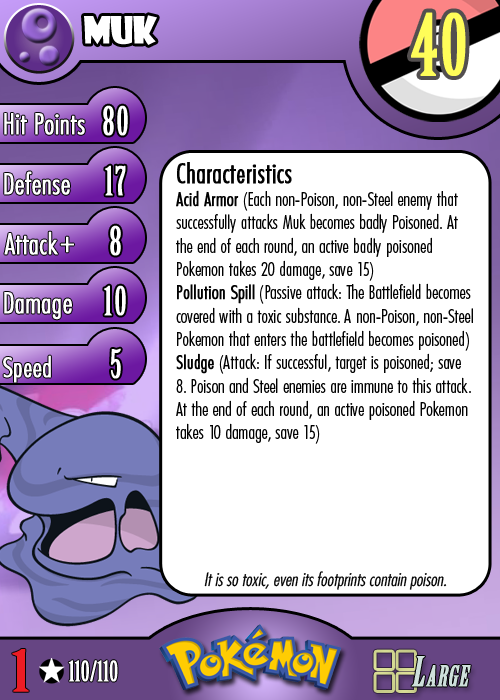
<style>
.page{position:relative;width:500px;height:700px;background:#ffffff}
.page>*{position:absolute;margin:0}
.t1{font:36.7px "ShowcardGothic-Reg";letter-spacing:-0.025em;color:#ffffff;scale:0.91 1}
.t2{font:83.3px "BirchStd";letter-spacing:0.025em;color:#fffd59;font-weight:bold}
.t3{font:27.8px "Futura-CondensedLight";color:#ffffff;font-weight:bold}
.t4{font:38.9px "BirchStd";letter-spacing:0.035em;color:#ffffff;font-weight:bold}
.t5{font:19.4px "FuturaCondensedBQ-Light";color:#010101}
.t6{font:27.8px "FuturaCondensedBQ-Light";color:#010101;font-weight:bold}
.t7{font:19.4px "FuturaCondensedBQ-Light";color:#010101;font-weight:bold}
.t8{font:30.6px "Futura-CondensedLight";color:#ffffff;font-weight:bold}
.t9{font:27.8px "FuturaCondensedBQ-Light";color:#ffffff;font-weight:bold}
.t10{font:18.1px "Futura-CondensedLight";color:#010101;font-style:italic}
.t11{font:55.6px "BirchStd";color:#ed1c24;font-weight:bold;scale:1.5 1}
.t12{font:27.8px "BirchStd";color:#ffffff;font-weight:bold}
</style>
<div class="page">
<p class="t1" style="left:84px;top:15px;width:73px;height:30px">muk</p>
<p class="t2" style="left:411px;top:12px;width:55px;height:64px">40</p>
<p class="t3" style="left:4px;top:113px;width:81px;height:22px">Hit Points</p>
<p class="t4" style="left:103px;top:105px;width:25px;height:31px">80</p>
<p class="t3" style="left:4px;top:171px;width:66px;height:24px">Defense</p>
<p class="t4" style="left:105px;top:165px;width:21px;height:31px">17</p>
<p class="t5" style="left:176px;top:162px;width:297px;height:282px"><span class="t6">Characteristics<br></span><span class="t7">Acid Armor</span> (Each non-Poison, non-Steel enemy that successfully attacks Muk becomes badly Poisoned. At the end of each round, an active badly poisoned Pokemon takes 20 damage, save 15)<br><span class="t7">Pollution Spill</span> (Passive attack: The Battlefield becomes covered with a toxic substance. A non-Poison, non-Steel Pokemon that enters the battlefield becomes poisoned)<br><span class="t7">Sludge</span> (Attack: If successful, target is poisoned; save 8. Poison and Steel enemies are immune to this attack. At the end of each round, an active poisoned Pokemon takes 10 damage, save 15)</p>
<p class="t3" style="left:4px;top:231px;width:54px;height:24px">Attack</p>
<p class="t4" style="left:110px;top:225px;width:11px;height:31px">8</p>
<p class="t8" style="left:60px;top:236px;width:14px;height:17px">+</p>
<p class="t3" style="left:4px;top:292px;width:68px;height:28px">Damage</p>
<p class="t4" style="left:104px;top:285px;width:22px;height:31px">10</p>
<p class="t4" style="left:111px;top:348px;width:10px;height:31px">5</p>
<p class="t9" style="left:3px;top:355px;width:48px;height:28px">Speed</p>
<p class="t10" style="left:204px;top:571px;width:243px;height:19px">It is so toxic, even its footprints contain poison.</p>
<p class="t11" style="left:12px;top:649px;width:17px;height:43px">1</p>
<p class="t12" style="left:68px;top:660px;width:50px;height:22px">110/110</p>
</div>
